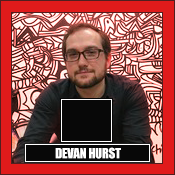
<style>
.page{position:relative;width:175px;height:175px;background:#e01b1b}
.page>*{position:absolute;margin:0}
.t1{font:13px "Impact";letter-spacing:-0.025em;color:#ffffff}
</style>
<div class="page">
<p class="t1" style="left:55px;top:147px;width:66px;height:12px">DEVAN HURST</p>
</div>
